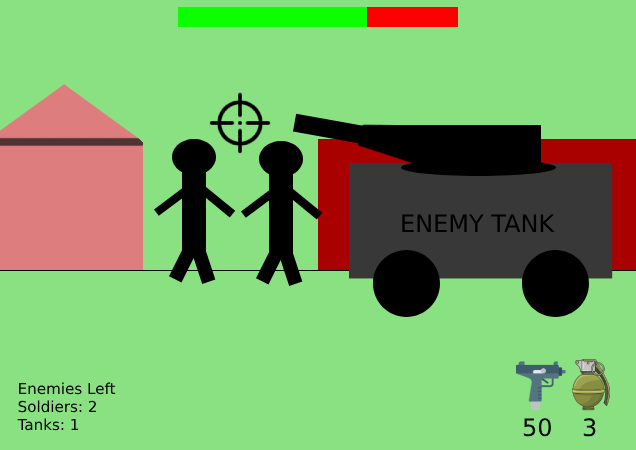
<style>
.page{position:relative;width:636px;height:450px;background:#89e182}
.page>*{position:absolute;margin:0}
.t1{font:15.1px "DejaVuSans";color:#000000}
.t2{font:24px "DejaVuSans";color:#000000}
</style>
<div class="page">
<p class="t1" style="left:17px;top:382px;width:99px;height:49px">Enemies Left<br>Soldiers: 2<br>Tanks: 1</p>
<p class="t2" style="left:523px;top:418px;width:28px;height:19px">50</p>
<p class="t2" style="left:583px;top:418px;width:13px;height:19px">3</p>
</div>
